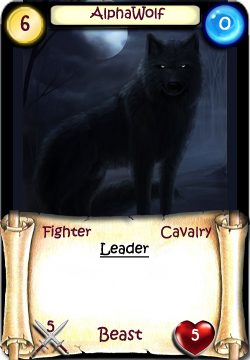
<style>
.page{position:relative;width:250px;height:360px}
.page>*{position:absolute;margin:0}
.t1{font:14px "KristenITC-Regular";color:#51092d}
.t2{font:20px "KristenITC-Regular";color:#51092d}
.t3{font:20px "KristenITC-Regular";color:#ffffff}
.t4{font:14px "KristenITC-Regular";color:#000000;text-decoration:underline}
.t5{font:16px "KristenITC-Regular";color:#51092d}
.t6{font:16px "KristenITC-Regular";color:#fefefe}
</style>
<div class="page">
<p class="t1" style="left:90px;top:6px;width:76px;height:15px">AlphaWolf</p>
<p class="t2" style="left:20px;top:15px;width:10px;height:16px">6</p>
<p class="t3" style="left:219px;top:16px;width:12px;height:14px">0</p>
<p class="t1" style="left:42px;top:225px;width:50px;height:14px">Fighter</p>
<p class="t1" style="left:161px;top:225px;width:51px;height:14px">Cavalry</p>
<p class="t4" style="left:100px;top:242px;width:49px;height:16px">Leader</p>
<p class="t5" style="left:46px;top:320px;width:9px;height:13px">5</p>
<p class="t5" style="left:97px;top:326px;width:46px;height:16px">Beast</p>
<p class="t6" style="left:191px;top:328px;width:8px;height:13px">5</p>
</div>
